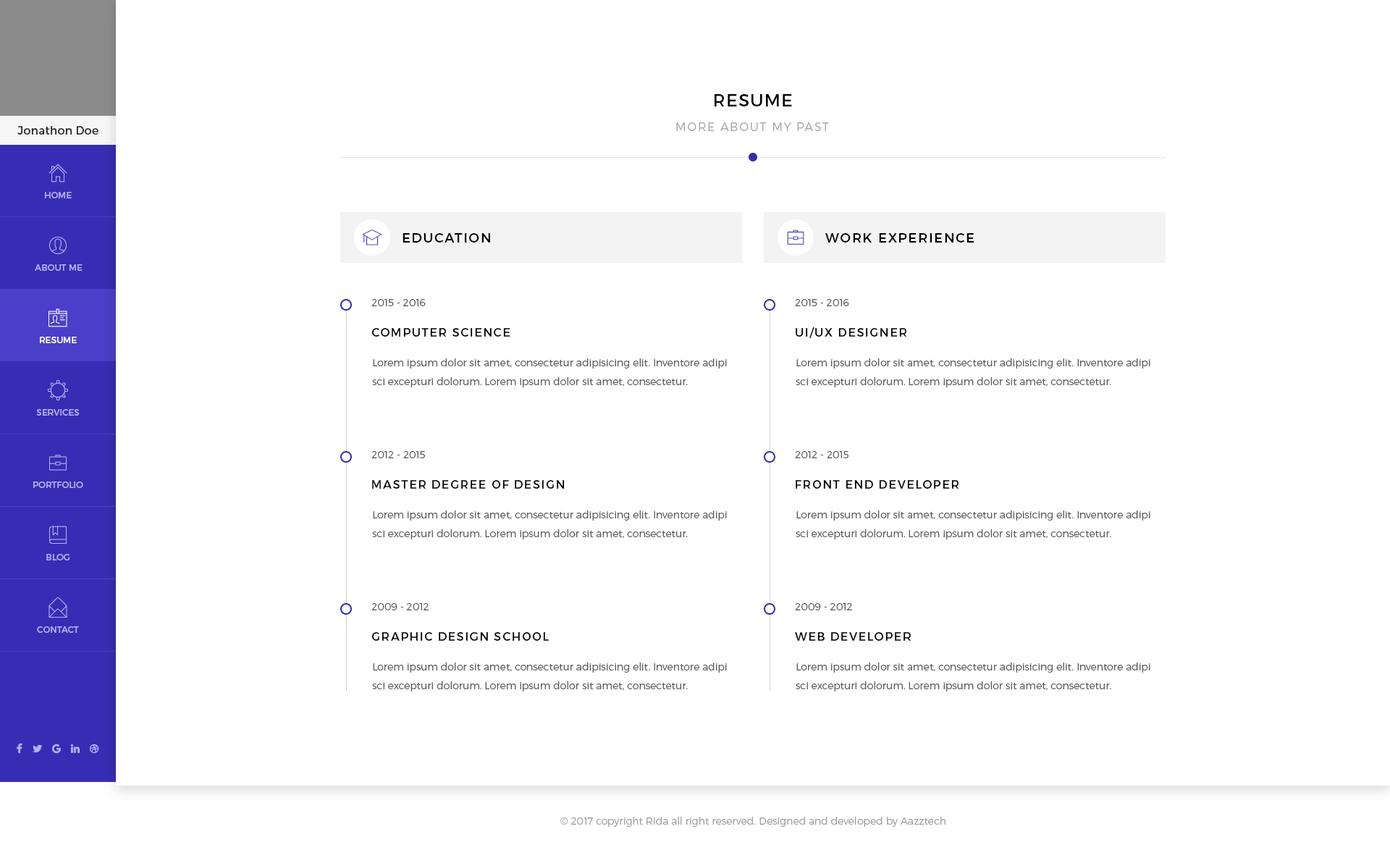
<style>
.page{position:relative;width:1390px;height:858px;background:#ffffff}
.page>*{position:absolute;margin:0}
.t1{font:17.4px "Montserrat-Regular";letter-spacing:0.05em;color:#000000;text-transform:uppercase}
.t2{font:11.6px "Montserrat-Regular";color:#2a2a2a}
.t3{font:11.6px "Montserrat-Light";letter-spacing:0.1em;color:#a8a8a8;text-transform:uppercase}
.t4{font:8.7px "Montserrat-Regular";color:#b5b0f7;text-transform:uppercase}
.t5{font:13px "Montserrat-Regular";letter-spacing:0.1em;color:#000000}
.t6{font:13px "Montserrat-Regular";letter-spacing:0.1em;color:#000000;text-transform:uppercase}
.t7{font:10.1px "Montserrat-Light";color:#5a5a5a}
.t8{font:11.6px "Montserrat-Regular";letter-spacing:0.1em;color:#000000}
.t9{font:11.6px "Montserrat-Regular";letter-spacing:0.1em;color:#000000;text-transform:uppercase}
.t10{font:8.7px "Montserrat-Regular";color:#ffffff;text-transform:uppercase}
.t11{font:10.1px/18.8px "Montserrat-Light";color:#5a5a5a}
.t12{font:10.1px "Montserrat-Light";color:#9f9f9f}
</style>
<div class="page">
<p class="t1" style="left:715px;top:94px;width:77px;height:12px">resume</p>
<p class="t2" style="left:17px;top:126px;width:81px;height:9px">Jonathon Doe</p>
<p class="t3" style="left:676px;top:122px;width:153px;height:9px">more about my past</p>
<p class="t4" style="left:45px;top:192px;width:27px;height:6px">HOME</p>
<p class="t5" style="left:403px;top:233px;width:87px;height:10px">EDUCATION</p>
<p class="t5" style="left:825px;top:233px;width:149px;height:10px"><span class="t6">work </span>EXPERIENCE</p>
<p class="t4" style="left:35px;top:264px;width:48px;height:7px">about me</p>
<p class="t7" style="left:371px;top:299px;width:55px;height:7px">2015 - 2016</p>
<p class="t7" style="left:795px;top:299px;width:54px;height:7px">2015 - 2016</p>
<p class="t8" style="left:371px;top:328px;width:139px;height:9px">COMPUTER SCIENCE</p>
<p class="t9" style="left:796px;top:327px;width:110px;height:11px">ui/ux designer</p>
<p class="t10" style="left:40px;top:337px;width:37px;height:6px">resume</p>
<p class="t11" style="left:372px;top:358px;width:355px;height:29px">Lorem ipsum dolor sit amet, consectetur adipisicing elit. Inventore adipi sci excepturi dolorum. Lorem ipsum dolor sit amet, consectetur.</p>
<p class="t11" style="left:796px;top:358px;width:354px;height:29px">Lorem ipsum dolor sit amet, consectetur adipisicing elit. Inventore adipi sci excepturi dolorum. Lorem ipsum dolor sit amet, consectetur.</p>
<p class="t4" style="left:36px;top:409px;width:43px;height:7px">services</p>
<p class="t7" style="left:371px;top:451px;width:54px;height:7px">2012 - 2015</p>
<p class="t7" style="left:795px;top:451px;width:53px;height:7px">2012 - 2015</p>
<p class="t4" style="left:33px;top:481px;width:50px;height:7px">portfolio</p>
<p class="t8" style="left:372px;top:480px;width:193px;height:9px">MASTER DEGREE OF DESIGN</p>
<p class="t8" style="left:796px;top:480px;width:163px;height:9px">FRONT END DEVELOPER</p>
<p class="t11" style="left:372px;top:510px;width:355px;height:29px">Lorem ipsum dolor sit amet, consectetur adipisicing elit. Inventore adipi sci excepturi dolorum. Lorem ipsum dolor sit amet, consectetur.</p>
<p class="t11" style="left:796px;top:510px;width:354px;height:29px">Lorem ipsum dolor sit amet, consectetur adipisicing elit. Inventore adipi sci excepturi dolorum. Lorem ipsum dolor sit amet, consectetur.</p>
<p class="t4" style="left:46px;top:554px;width:23px;height:6px">blog</p>
<p class="t7" style="left:371px;top:603px;width:58px;height:7px">2009 - 2012</p>
<p class="t7" style="left:795px;top:603px;width:57px;height:7px">2009 - 2012</p>
<p class="t4" style="left:37px;top:626px;width:42px;height:7px">contact</p>
<p class="t8" style="left:371px;top:632px;width:178px;height:9px">GRAPHIC DESIGN SCHOOL</p>
<p class="t8" style="left:795px;top:632px;width:116px;height:9px">WEB DEVELOPER</p>
<p class="t11" style="left:372px;top:662px;width:355px;height:29px">Lorem ipsum dolor sit amet, consectetur adipisicing elit. Inventore adipi sci excepturi dolorum. Lorem ipsum dolor sit amet, consectetur.</p>
<p class="t11" style="left:796px;top:662px;width:354px;height:29px">Lorem ipsum dolor sit amet, consectetur adipisicing elit. Inventore adipi sci excepturi dolorum. Lorem ipsum dolor sit amet, consectetur.</p>
<p class="t12" style="left:560px;top:817px;width:385px;height:10px">© 2017 copyright Rida all right reserved. Designed and developed by Aazztech</p>
</div>
